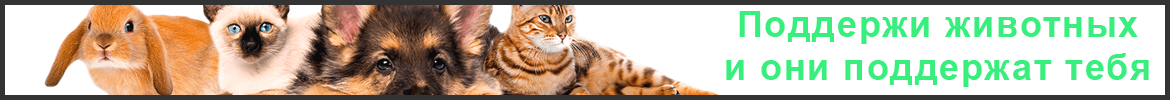
<style>
.page{position:relative;width:1170px;height:100px;background:#ffffff}
.page>*{position:absolute;margin:0}
.t1{font:36px "Arial-BoldMT";letter-spacing:0.05em;color:#38ef7d}
</style>
<div class="page">
<p class="t1" style="left:726px;top:11px;width:423px;height:76px;text-align:center">Поддержи животных<br>и они поддержат тебя</p>
</div>
